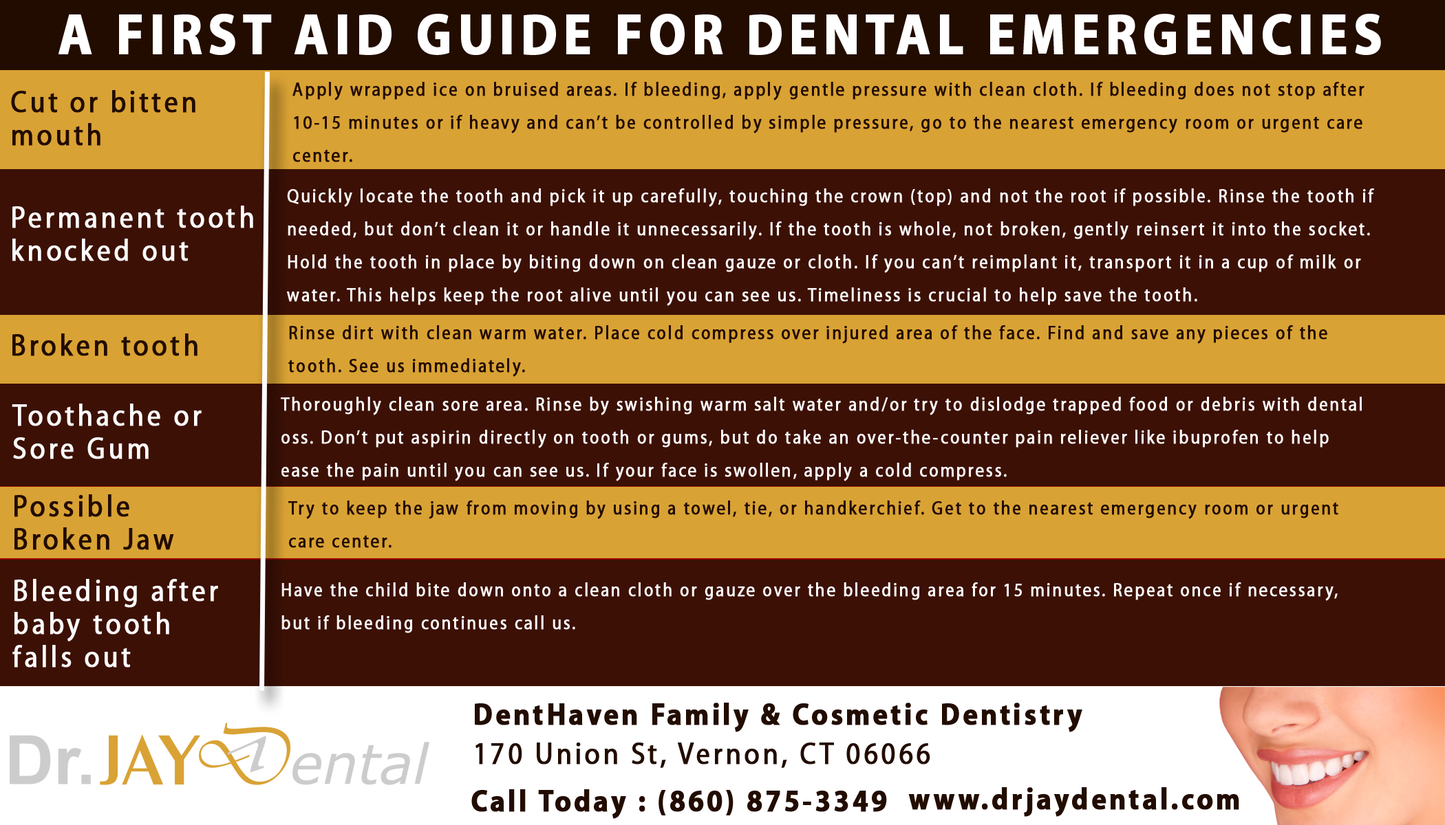
<style>
.page{position:relative;width:1445px;height:825px;background:#3c1005}
.page>*{position:absolute;margin:0}
.t1{font:99.4px "MyriadPro-Bold";letter-spacing:0.1em;color:#ffffff;font-weight:bold;scale:0.89 1}
.t2{font:32.5px/33px "MyriadPro-Regular";letter-spacing:0.1em;color:#220c00;font-weight:bold;scale:0.88 1}
.t3{font:53.1px/33px "MyriadPro-Regular";letter-spacing:0.1em;color:#220c00;font-weight:bold;scale:0.88 1}
.t4{font:32.5px/33px "MyriadPro-Regular";letter-spacing:0.1em;color:#fafafa;font-weight:bold;scale:0.88 1}
.t5{font:53.1px/33px "MyriadPro-Regular";letter-spacing:0.1em;color:#fafafa;font-weight:bold;scale:0.88 1}
.t6{font:53.1px "MyriadPro-Regular";letter-spacing:0.1em;color:#220c00;font-weight:bold;scale:0.88 1}
.t7{font:53.1px "MyriadPro-Bold";letter-spacing:0.1em;color:#220c00;font-weight:bold;scale:0.88 1}
</style>
<div class="page">
<p class="t1" style="left:58px;top:14px;width:1323px;height:41px">A FIRST AID GUIDE FOR DENTAL EMERGENCIES</p>
<p class="t2" style="left:292px;top:82px;width:1072px;height:80px">Apply wrapped ice on bruised areas. If bleeding, apply gentle pressure with clean cloth. If bleeding does not stop after<br>10-15 minutes or if heavy and can’t be controlled by simple pressure, go to the nearest emergency room or urgent care<br>center.</p>
<p class="t3" style="left:11px;top:90px;width:184px;height:56px">Cut or bitten<br>mouth</p>
<p class="t4" style="left:287px;top:188px;width:1087px;height:118px">Quickly locate the tooth and pick it up carefully, touching the crown (top) and not the root if possible. Rinse the tooth if<br>needed, but don’t clean it or handle it unnecessarily. If the tooth is whole, not broken, gently reinsert it into the socket.<br>Hold the tooth in place by biting down on clean gauze or cloth. If you can’t reimplant it, transport it in a cup of milk or<br>water. This helps keep the root alive until you can see us. Timeliness is crucial to help save the tooth.</p>
<p class="t5" style="left:12px;top:206px;width:241px;height:55px">Permanent tooth<br>knocked out</p>
<p class="t2" style="left:288px;top:325px;width:1039px;height:52px">Rinse dirt with clean warm water. Place cold compress over injured area of the face. Find and save any pieces of the<br>tooth. See us immediately.</p>
<p class="t6" style="left:12px;top:334px;width:185px;height:22px">Broken tooth</p>
<p class="t4" style="left:281px;top:397px;width:1080px;height:85px">Thoroughly clean sore area. Rinse by swishing warm salt water and/or try to dislodge trapped food or debris with dental<br>oss. Don’t put aspirin directly on tooth or gums, but do take an over-the-counter pain reliever like ibuprofen to help<br>ease the pain until you can see us. If your face is swollen, apply a cold compress.</p>
<p class="t5" style="left:12px;top:404px;width:190px;height:56px">Toothache or<br>Sore Gum</p>
<p class="t3" style="left:14px;top:495px;width:160px;height:55px">Possible<br>Broken Jaw</p>
<p class="t2" style="left:288px;top:501px;width:1050px;height:47px">Try to keep the jaw from moving by using a towel, tie, or handkerchief. Get to the nearest emergency room or urgent<br>care center.</p>
<p class="t5" style="left:12px;top:579px;width:206px;height:89px">Bleeding after<br>baby tooth <br>falls out</p>
<p class="t4" style="left:281px;top:583px;width:1056px;height:51px">Have the child bite down onto a clean cloth or gauze over the bleeding area for 15 minutes. Repeat once if necessary,<br>but if bleeding continues call us.</p>
<p class="t7" style="left:475px;top:703px;width:607px;height:30px">DentHaven Family &amp; Cosmetic Dentistry</p>
<p class="t6" style="left:475px;top:743px;width:455px;height:25px">170 Union St, Vernon, CT 06066</p>
<p class="t7" style="left:471px;top:790px;width:416px;height:29px">Call Today : (860) 875-3349</p>
<p class="t7" style="left:908px;top:788px;width:331px;height:29px">www.drjaydental.com</p>
</div>
